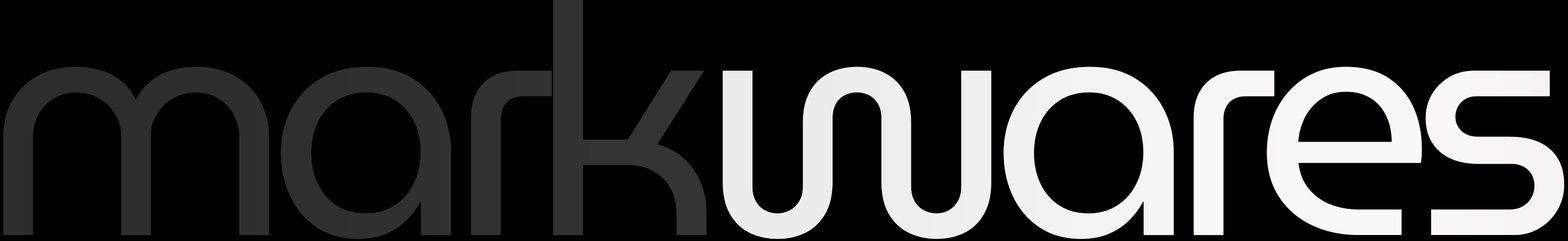
<style>
.page{position:relative;width:1568px;height:241px;background:#000000}
.page>*{position:absolute;margin:0}
.t1{font:321.9px "MuseoModerno-Regular";letter-spacing:-0.08em;color:#303030}
.t2{font:321.9px "MuseoModerno-Regular";letter-spacing:-0.08em;color:#f5f4f3}
</style>
<div class="page">
<p class="t1" style="left:3px;top:0px;width:704px;height:239px">mark</p>
<p class="t2" style="left:723px;top:66px;width:841px;height:173px">wares</p>
</div>
